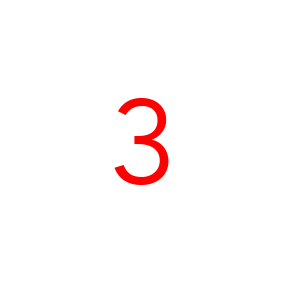
<style>
.page{position:relative;width:283px;height:283px;background:#ffffff}
.page>*{position:absolute;margin:0}
.t1{font:120px "Avenir-Book";color:#ff0000}
</style>
<div class="page">
<p class="t1" style="left:114px;top:98px;width:55px;height:87px">3</p>
</div>
